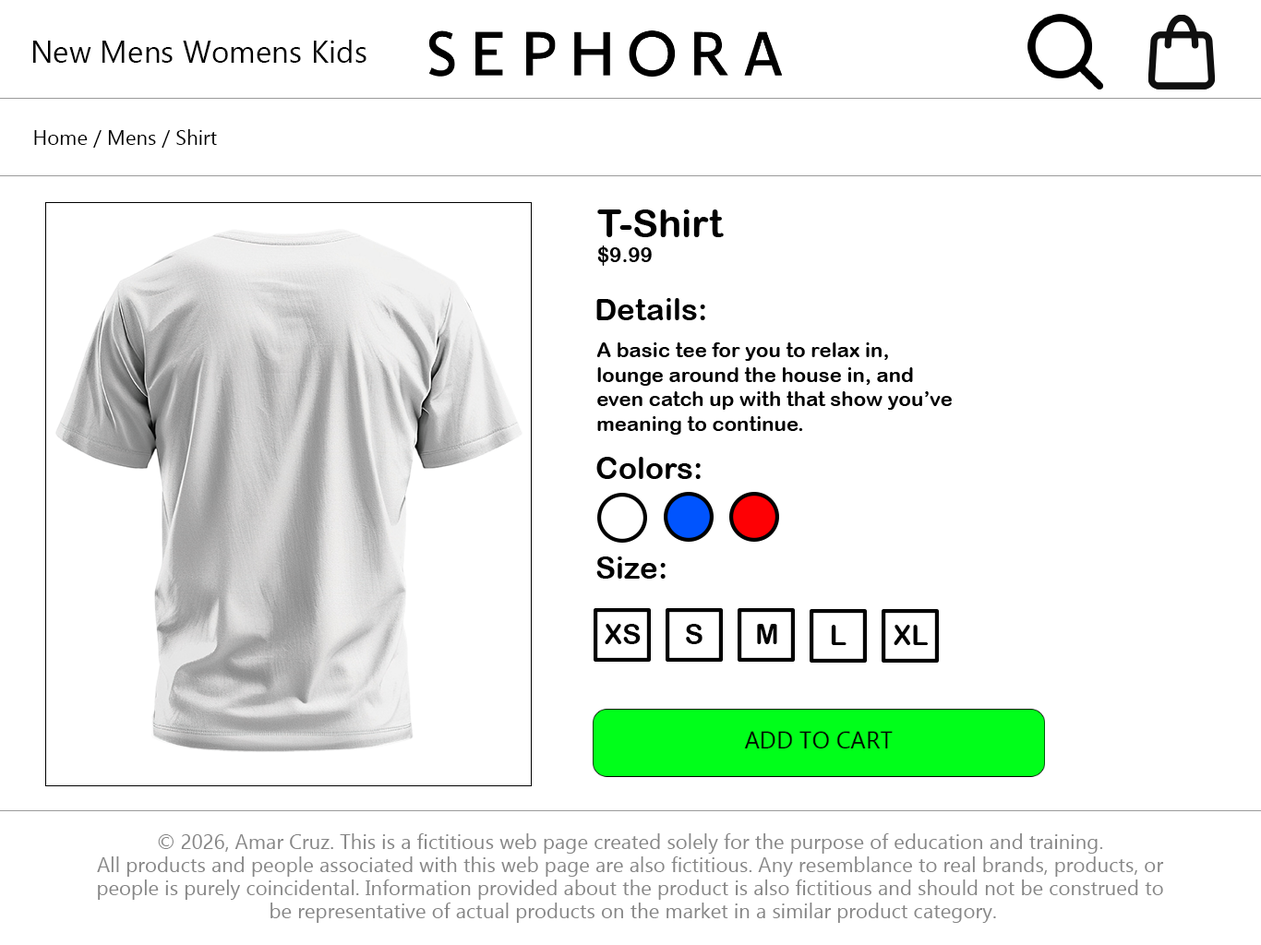
<style>
.page{position:relative;width:1261px;height:945px;background:#ffffff}
.page>*{position:absolute;margin:0}
.t1{font:30.8px "Gadugi";color:#000000}
.t2{font:20.5px "Gadugi";color:#000000}
.t3{font:20.5px/23.1px "Gadugi";color:#737373}
</style>
<div class="page">
<p class="t1" style="left:33px;top:40px;width:334px;height:23px">New Mens Womens Kids</p>
<p class="t2" style="left:34px;top:129px;width:183px;height:19px">Home / Mens / Shirt</p>
<p class="t3" style="left:97px;top:834px;width:1067px;height:89px;text-align:center">© 2026, Amar Cruz. This is a fictitious web page created solely for the purpose of education and training. <br>All products and people associated with this web page are also fictitious. Any resemblance to real brands, products, or <br>people is purely coincidental. Information provided about the product is also fictitious and should not be construed to <br>be representative of actual products on the market in a similar product category.</p>
</div>
